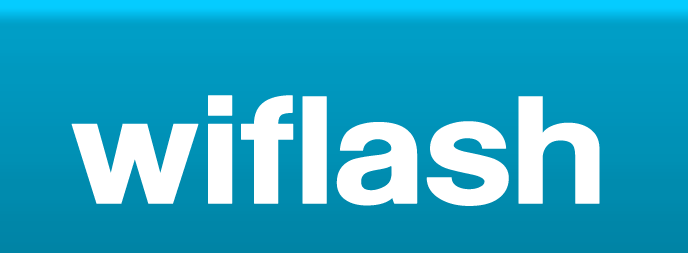
<style>
.page{position:relative;width:688px;height:253px}
.page>*{position:absolute;margin:0}
.t1{font:148px "Coolvetica";color:#ffffff;font-weight:bold;scale:1.12 1}
</style>
<div class="page">
<p class="t1" style="left:71px;top:95px;width:529px;height:111px">wiflash</p>
</div>
